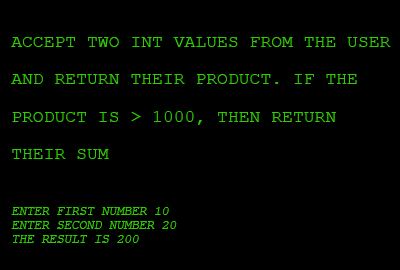
<style>
.page{position:relative;width:400px;height:270px;background:#000000}
.page>*{position:absolute;margin:0}
.t1{font:18.1px/37.5px "CourierNewPSMT";color:#30cc00;text-transform:uppercase}
.t2{font:12.5px/13.9px "CourierNewPSMT";color:#30cc00;text-transform:uppercase;font-style:italic}
</style>
<div class="page">
<p class="t1" style="left:11px;top:37px;width:380px;height:206px">accept two int values from the user<br>and return their product. if the<br>product is &gt; 1000, then return<br>their sum<br><span class="t2"><br><br><br>enter first number 10<br>enter second number 20<br>the result is 200</span></p>
</div>
